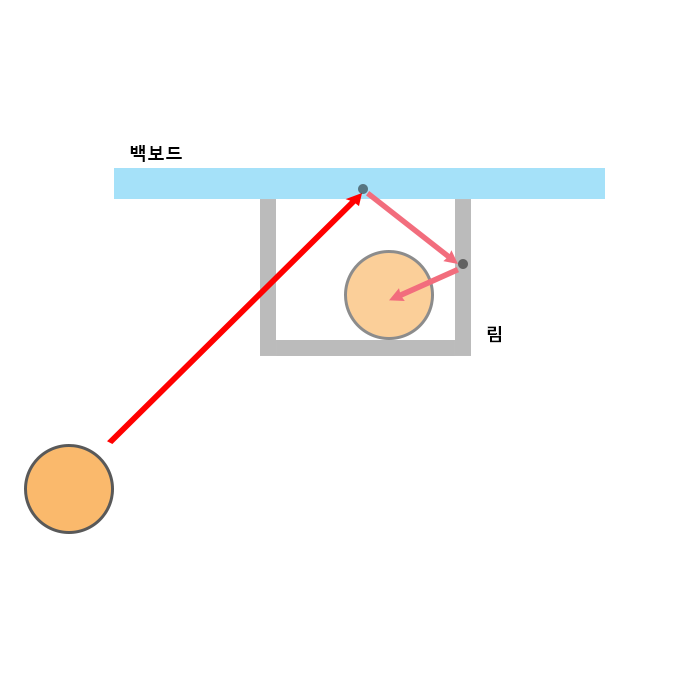
<style>
.page{position:relative;width:700px;height:700px;background:#ffffff}
.page>*{position:absolute;margin:0}
.t1{font:18px "MalgunGothicBold";color:#000000}
.t2{font:17.8px "MalgunGothicBold";color:#000000}
</style>
<div class="page">
<p class="t1" style="left:130px;top:145px;width:52px;height:17px">백보드</p>
<p class="t2" style="left:487px;top:326px;width:14px;height:17px">림</p>
</div>
